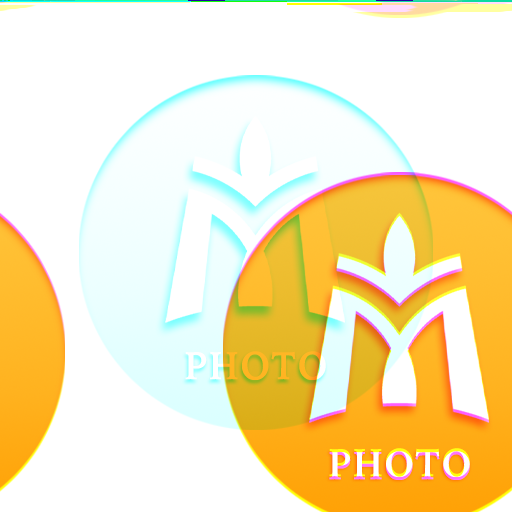
<style>
.page{position:relative;width:512px;height:512px;background:#ffffff}
.page>*{position:absolute;margin:0}
.t1{font:38.7px "IowanOldStyle-Bold";letter-spacing:0.025em;text-transform:uppercase;font-weight:bold;scale:0.91 1}
</style>
<div class="page">
<p class="t1" style="left:185px;top:349px;width:141px;height:29px">Photo</p>
</div>
